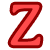
<style>
.page{position:relative;width:50px;height:50px;background:#ffffff}
.page>*{position:absolute;margin:0}
.t1{font:87.8px "JasmineUPC";letter-spacing:-0.01em;color:#ff4b4b;font-weight:bold}
</style>
<div class="page">
<p class="t1" style="left:10px;top:4px;width:31px;height:42px">Z</p>
</div>
